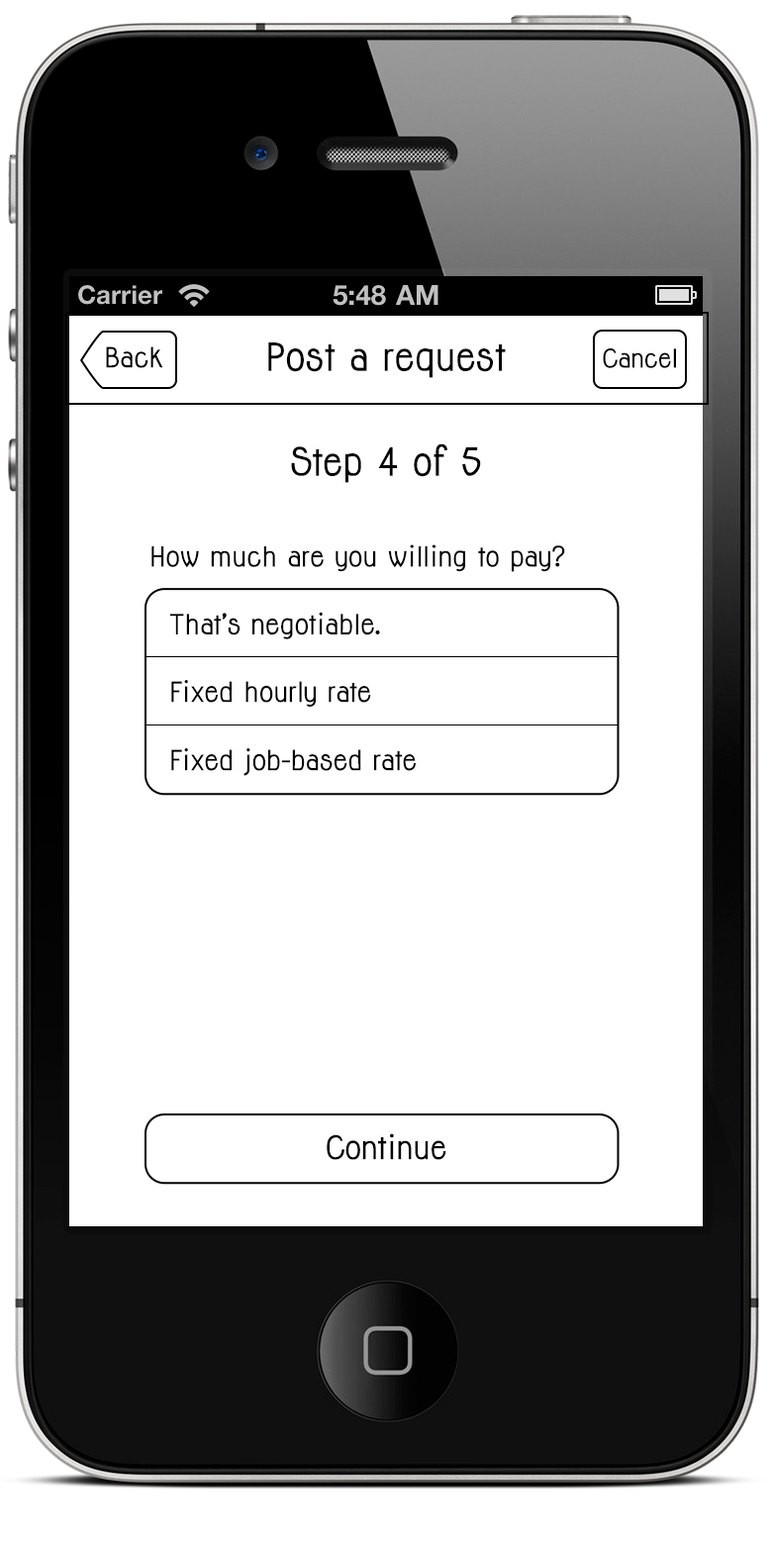
<style>
.page{position:relative;width:772px;height:1545px;background:#ffffff}
.page>*{position:absolute;margin:0}
.t1{font:25.7px "Jolly-Bold";color:#000000}
.t2{font:35.6px "Jolly-Bold";color:#000000}
.t3{font:23.8px "Jolly-Bold";color:#000000}
.t4{font:25.5px "Jolly-Bold";color:#000000}
.t5{font:29.8px "Jolly-Bold";color:#000000}
</style>
<div class="page">
<p class="t1" style="left:106px;top:346px;width:57px;height:22px">Back</p>
<p class="t2" style="left:268px;top:342px;width:238px;height:36px">Post a request</p>
<p class="t3" style="left:603px;top:348px;width:73px;height:20px">Cancel</p>
<p class="t2" style="left:291px;top:443px;width:190px;height:40px">Step 4 of 5</p>
<p class="t4" style="left:151px;top:544px;width:414px;height:28px">How much are you willing to pay?</p>
<p class="t1" style="left:170px;top:612px;width:210px;height:27px">That’s negotiable.</p>
<p class="t1" style="left:171px;top:680px;width:200px;height:27px">Fixed hourly rate</p>
<p class="t1" style="left:171px;top:748px;width:245px;height:28px">Fixed job-based rate</p>
<p class="t5" style="left:327px;top:1133px;width:119px;height:27px">Continue</p>
</div>
